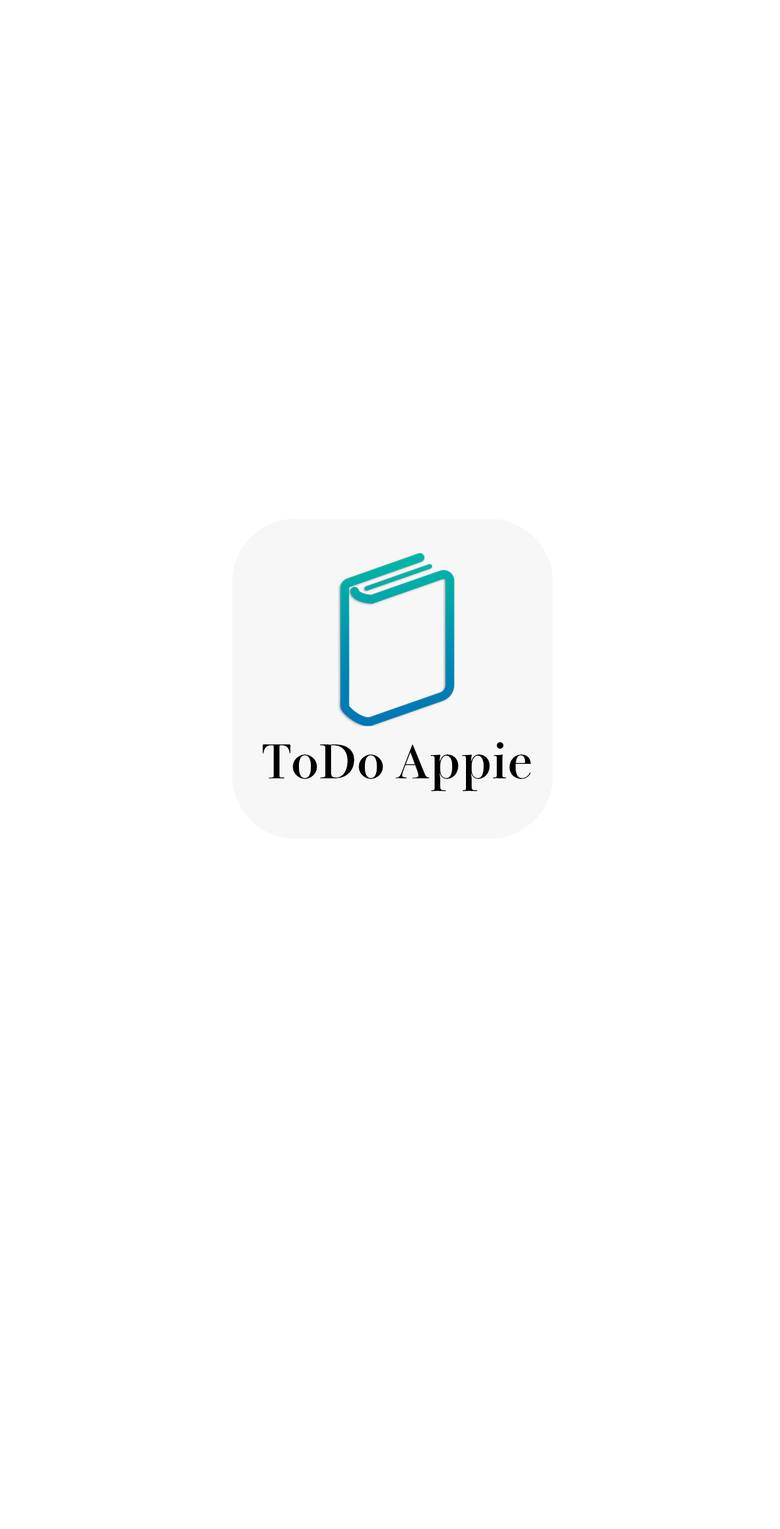
<style>
.page{position:relative;width:780px;height:1529px;background:#ffffff}
.page>*{position:absolute;margin:0}
.t1{font:45.2px "ToppanBunkyuMidashiMinchoStdN-ExtraBold";color:#000000}
</style>
<div class="page">
<p class="t1" style="left:262px;top:742px;width:268px;height:50px">ToDo Appie</p>
</div>
